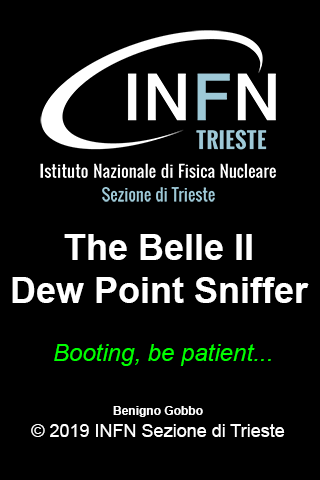
<style>
.page{position:relative;width:320px;height:480px;background:#000000}
.page>*{position:absolute;margin:0}
.t1{font:36px "Arial-BoldMT";color:#ffffff}
.t2{font:24px "Arial-ItalicMT";color:#00ff00}
.t3{font:18px "ArialMT";color:#ffffff}
.t4{font:12px "Arial-BoldMT";color:#ffffff}
</style>
<div class="page">
<p class="t1" style="left:12px;top:234px;width:297px;height:69px;text-align:center">The Belle II<br>Dew Point Sniffer</p>
<p class="t2" style="left:54px;top:344px;width:217px;height:22px">Booting, be patient...</p>
<p class="t3" style="left:31px;top:406px;width:254px;height:31px;text-align:center"><span class="t4">Benigno Gobbo<br></span>© 2019 INFN Sezione di Trieste</p>
</div>
